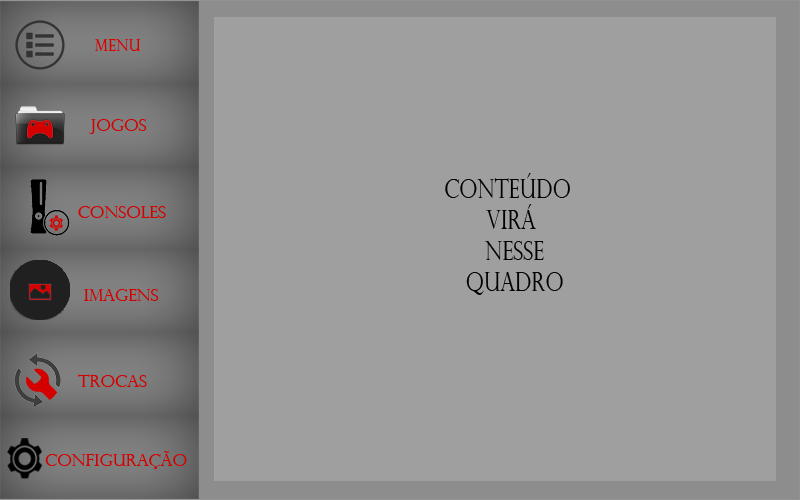
<style>
.page{position:relative;width:800px;height:500px;background:#9f9f9f}
.page>*{position:absolute;margin:0}
.t1{font:15.8px "PerpetuaTitlingMT-Light";letter-spacing:0.01em;color:#dc0000;scale:0.97 1}
.t2{font:17.2px "PerpetuaTitlingMT-Light";letter-spacing:0.01em;color:#d40000;scale:0.97 1}
.t3{font:25.9px/31.1px "PerpetuaTitlingMT-Light";letter-spacing:0.01em;color:#000000;scale:0.8 1}
</style>
<div class="page">
<p class="t1" style="left:95px;top:39px;width:46px;height:12px">Menu</p>
<p class="t2" style="left:89px;top:119px;width:58px;height:15px">jogos</p>
<p class="t3" style="left:445px;top:173px;width:125px;height:122px;text-align:center">conteúdo <br>virá<br> nesse<br> quadro</p>
<p class="t2" style="left:78px;top:206px;width:88px;height:12px">consoles</p>
<p class="t2" style="left:84px;top:289px;width:75px;height:12px">imagens</p>
<p class="t2" style="left:78px;top:374px;width:69px;height:13px">trocas</p>
<p class="t2" style="left:45px;top:451px;width:142px;height:18px">Configuração</p>
</div>
